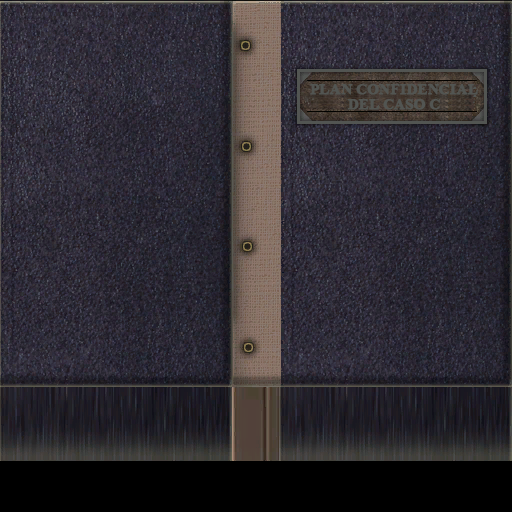
<style>
.page{position:relative;width:512px;height:512px}
.page>*{position:absolute;margin:0}
.t1{font:15px/15px "TimesNewRomanPS-BoldMT";letter-spacing:-0.04em;color:#525552;text-transform:uppercase;font-weight:bold}
</style>
<div class="page">
<p class="t1" style="left:310px;top:84px;width:168px;height:26px;text-align:center">Plan Confidencial<br>del Caso C</p>
</div>
